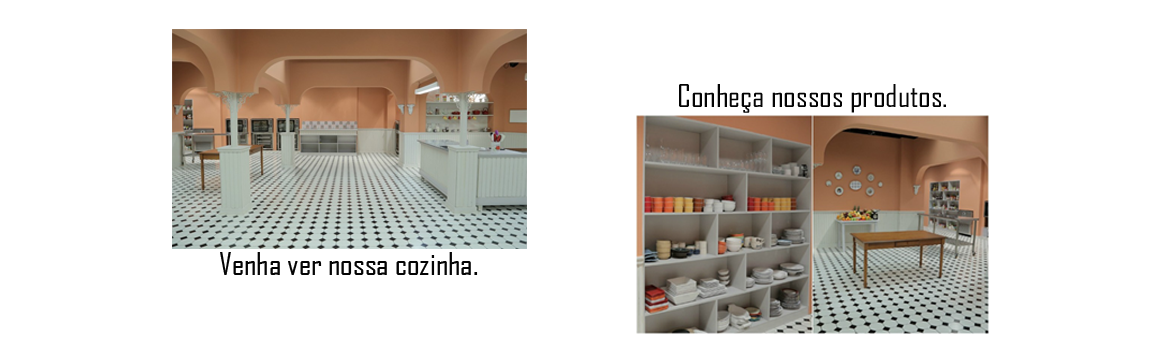
<style>
.page{position:relative;width:1161px;height:362px;background:#ffffff}
.page>*{position:absolute;margin:0}
.t1{font:30.1px "AgencyFB-Reg";color:#040404;scale:1.09 1}
</style>
<div class="page">
<p class="t1" style="left:679px;top:84px;width:267px;height:29px">Conheça nossos produtos.</p>
<p class="t1" style="left:220px;top:252px;width:258px;height:23px">Venha ver nossa cozinha.</p>
</div>
